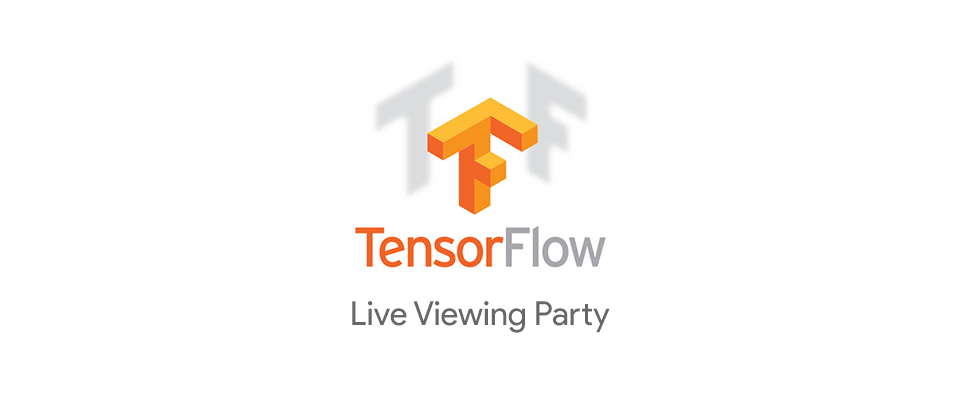
<style>
.page{position:relative;width:960px;height:400px;background:#ffffff}
.page>*{position:absolute;margin:0}
.t1{font:33px "ProductSans-Regular";color:#676767}
</style>
<div class="page">
<p class="t1" style="left:352px;top:301px;width:258px;height:32px">Live Viewing Party</p>
</div>
